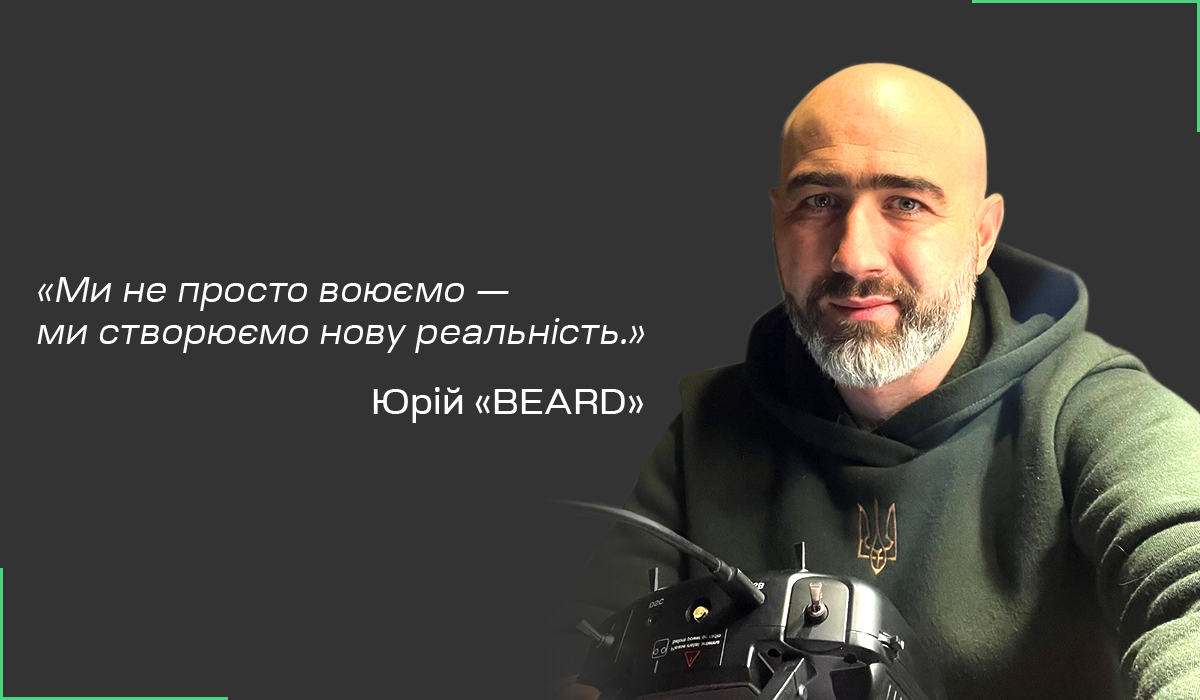
<style>
.page{position:relative;width:1200px;height:700px;background:#333333}
.page>*{position:absolute;margin:0}
.t1{font:35.2px "Ruberoid-Oblique";color:#ffffff}
.t2{font:35.2px "Ruberoid-Medium";color:#ffffff}
</style>
<div class="page">
<p class="t1" style="left:37px;top:277px;width:608px;height:76px">«Ми не просто воюємо —<br>ми створюємо нову реальність.»</p>
<p class="t2" style="left:373px;top:387px;width:270px;height:36px">Юрій «BEARD»</p>
</div>
